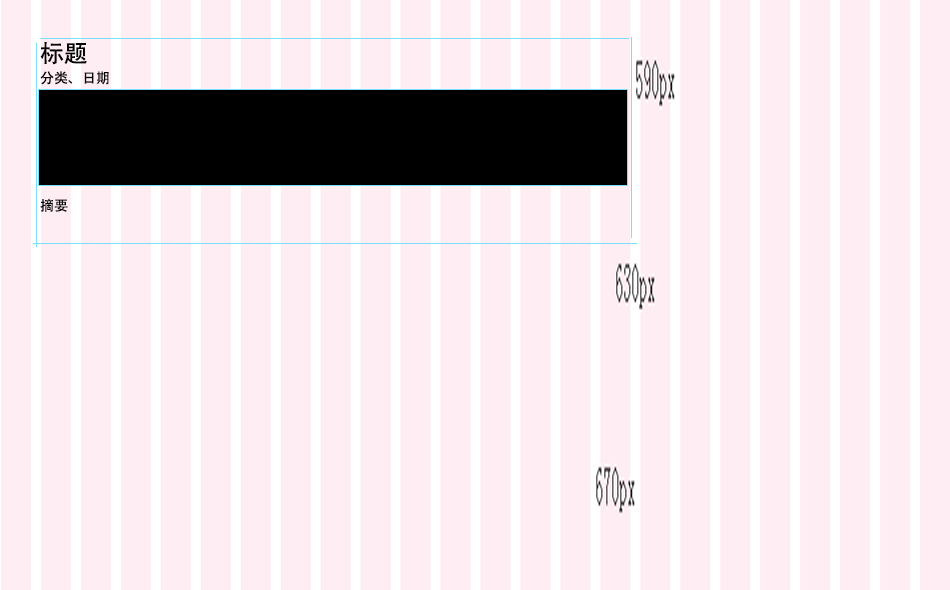
<style>
.page{position:relative;width:950px;height:590px;background:#feedf2}
.page>*{position:absolute;margin:0}
.t1{font:24px "AdobeHeitiStd-Regular";color:#030303}
.t2{font:14px "AdobeHeitiStd-Regular";color:#030303}
</style>
<div class="page">
<p class="t1" style="left:40px;top:42px;width:47px;height:23px">标题</p>
<p class="t2" style="left:40px;top:71px;width:69px;height:14px">分类、日期</p>
<p class="t2" style="left:40px;top:198px;width:28px;height:14px">摘要</p>
</div>
